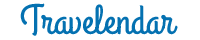
<style>
.page{position:relative;width:200px;height:40px;background:#ffffff}
.page>*{position:absolute;margin:0}
.t1{font:41.7px "GrandHotel-Regular";color:#0471b1}
</style>
<div class="page">
<p class="t1" style="left:20px;top:3px;width:158px;height:33px">Travelendar</p>
</div>
